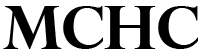
<style>
.page{position:relative;width:205px;height:53px;background:#ffffff}
.page>*{position:absolute;margin:0}
.t1{font:60px "PerpetuaTitlingMT-Bold";color:#000000}
</style>
<div class="page">
<p class="t1" style="left:3px;top:6px;width:195px;height:43px">MCHC</p>
</div>
